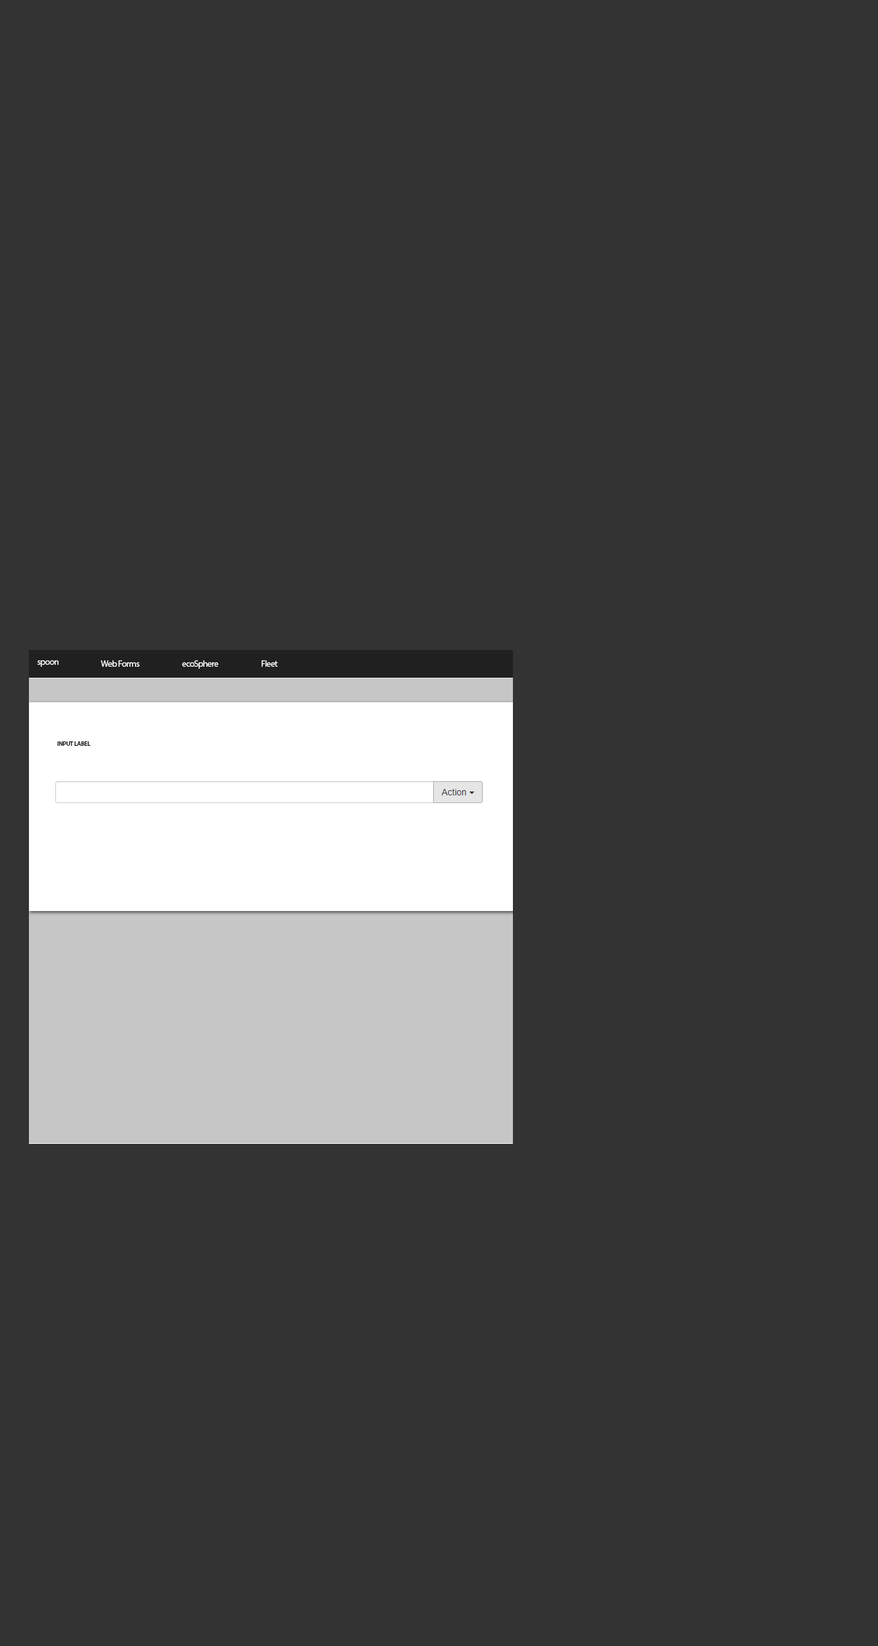
<style>
.page{position:relative;width:878px;height:1646px;background:#333333}
.page>*{position:absolute;margin:0}
.t1{font:9px "MyriadPro-Regular";letter-spacing:-0.045em;color:#ffffff}
.t2{font:6.4px "MyriadPro-Semibold";letter-spacing:-0.045em;color:#131313}
</style>
<div class="page">
<p class="t1" style="left:37px;top:660px;width:22px;height:7px">spoon</p>
<p class="t1" style="left:101px;top:660px;width:39px;height:7px">Web Forms</p>
<p class="t1" style="left:182px;top:660px;width:37px;height:9px">ecoSphere</p>
<p class="t1" style="left:262px;top:660px;width:16px;height:7px">Fleet</p>
<p class="t2" style="left:57px;top:741px;width:34px;height:5px">INPUT LABEL</p>
</div>
